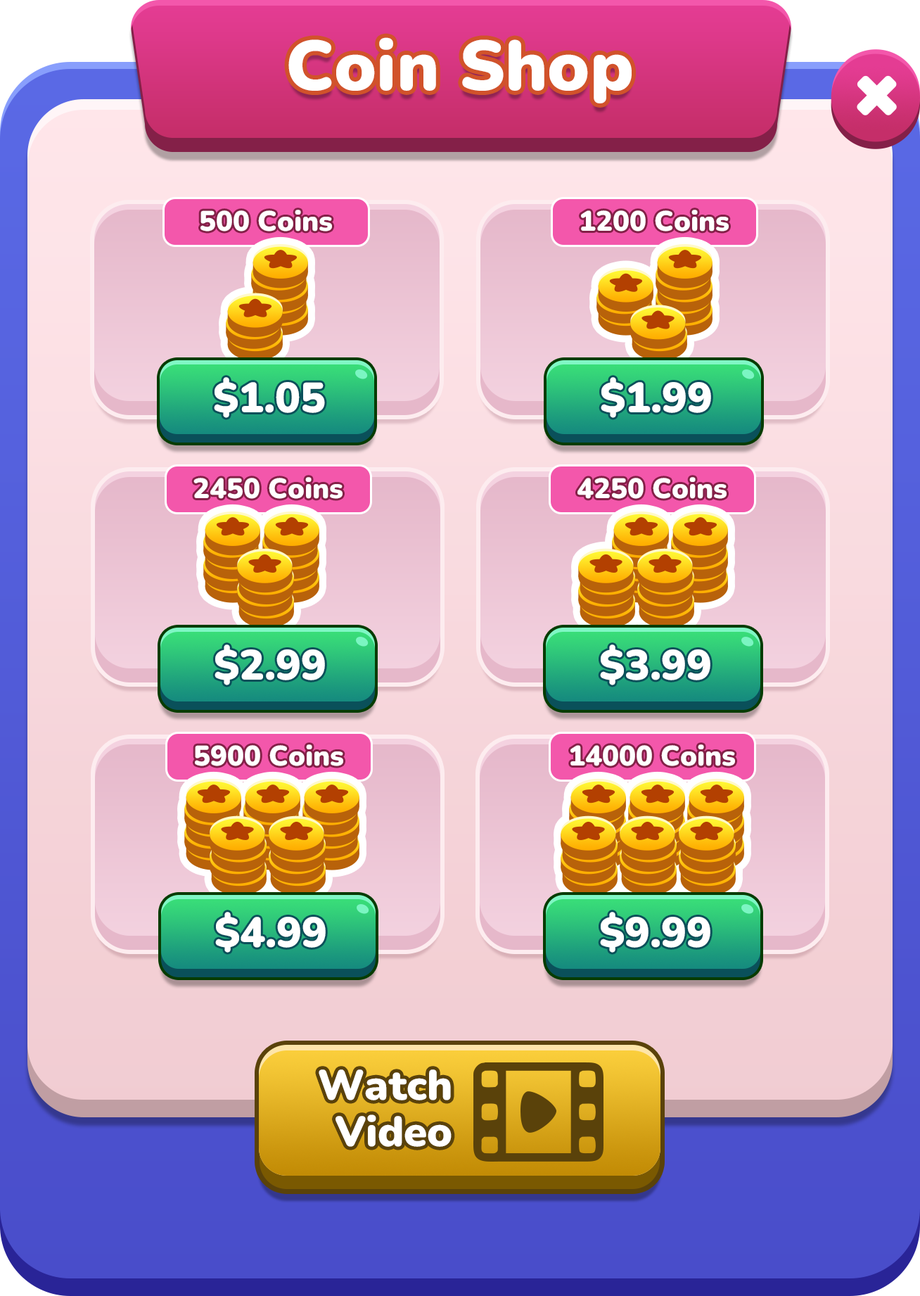
<style>
.page{position:relative;width:920px;height:1296px}
.page>*{position:absolute;margin:0}
.t1{font:70.4px "Nunito-Black";color:#ffffff}
.t2{font:28.1px "Nunito-Black";color:#ffffff}
.t3{font:42.2px "Nunito-Black";color:#ffffff}
.t4{font:42.2px/46.9px "Nunito-Black";color:#ffffff}
</style>
<div class="page">
<p class="t1" style="left:288px;top:37px;width:344px;height:66px">Coin Shop</p>
<p class="t2" style="left:200px;top:210px;width:132px;height:21px">500 Coins</p>
<p class="t2" style="left:581px;top:210px;width:148px;height:21px">1200 Coins</p>
<p class="t3" style="left:214px;top:377px;width:111px;height:41px">$1.05</p>
<p class="t3" style="left:601px;top:377px;width:110px;height:41px">$1.99</p>
<p class="t2" style="left:193px;top:477px;width:150px;height:22px">2450 Coins</p>
<p class="t2" style="left:578px;top:477px;width:149px;height:22px">4250 Coins</p>
<p class="t3" style="left:215px;top:644px;width:110px;height:41px">$2.99</p>
<p class="t3" style="left:600px;top:644px;width:111px;height:41px">$3.99</p>
<p class="t2" style="left:195px;top:744px;width:148px;height:22px">5900 Coins</p>
<p class="t2" style="left:571px;top:744px;width:164px;height:22px">14000 Coins</p>
<p class="t3" style="left:215px;top:912px;width:111px;height:41px">$4.99</p>
<p class="t3" style="left:600px;top:912px;width:111px;height:41px">$9.99</p>
<p class="t4" style="left:319px;top:1069px;width:133px;height:78px;text-align:right">Watch<br>Video</p>
</div>
